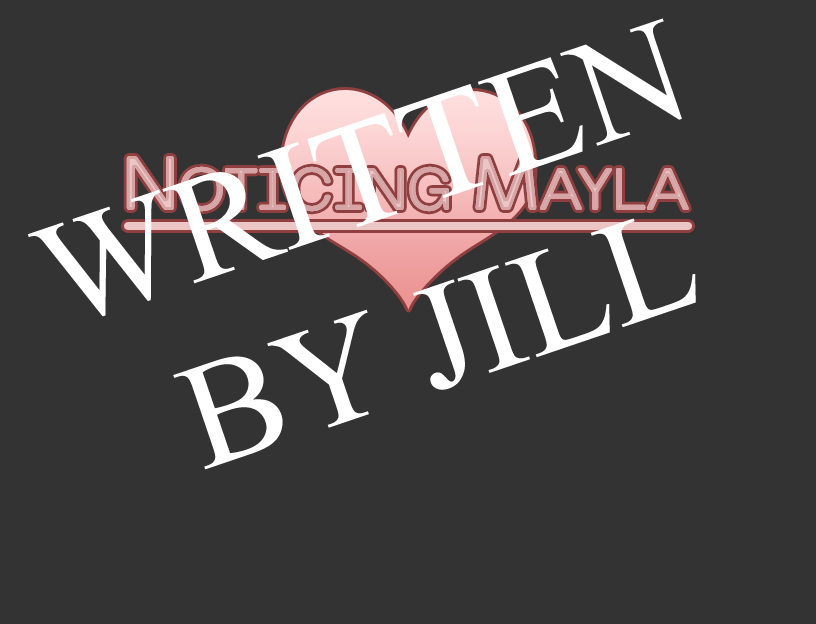
<style>
.page{position:relative;width:816px;height:624px;background:#333333}
.page>*{position:absolute;margin:0}
.t1{font:150px "TimesNewRomanPSMT";color:#ffffff}
.t2{font:58.3px "VillerayRounded-Regular";color:#d6a4a4}
.t3{font:75px "VillerayRounded-Regular";color:#d6a4a4}
</style>
<div class="page">
<p class="t1" style="left:27px;top:18px;width:669px;height:452px;text-align:center;rotate:-19deg">WRITTEN <br>BY JILL</p>
<p class="t2" style="left:126px;top:156px;width:563px;height:56px"><span class="t3">N</span>OTICING<span class="t3"> M</span>AYLA</p>
<p class="t2" style="left:126px;top:156px;width:563px;height:56px"><span class="t3">N</span>OTICING<span class="t3"> M</span>AYLA</p>
</div>
